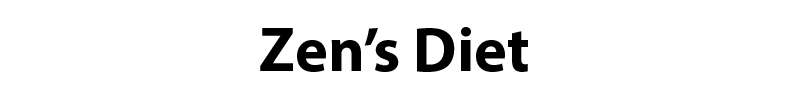
<style>
.page{position:relative;width:800px;height:100px;background:#ffffff}
.page>*{position:absolute;margin:0}
.t1{font:62.5px "MyriadPro-Bold";color:#000000}
</style>
<div class="page">
<p class="t1" style="left:260px;top:27px;width:268px;height:45px">Zen’s Diet</p>
</div>
